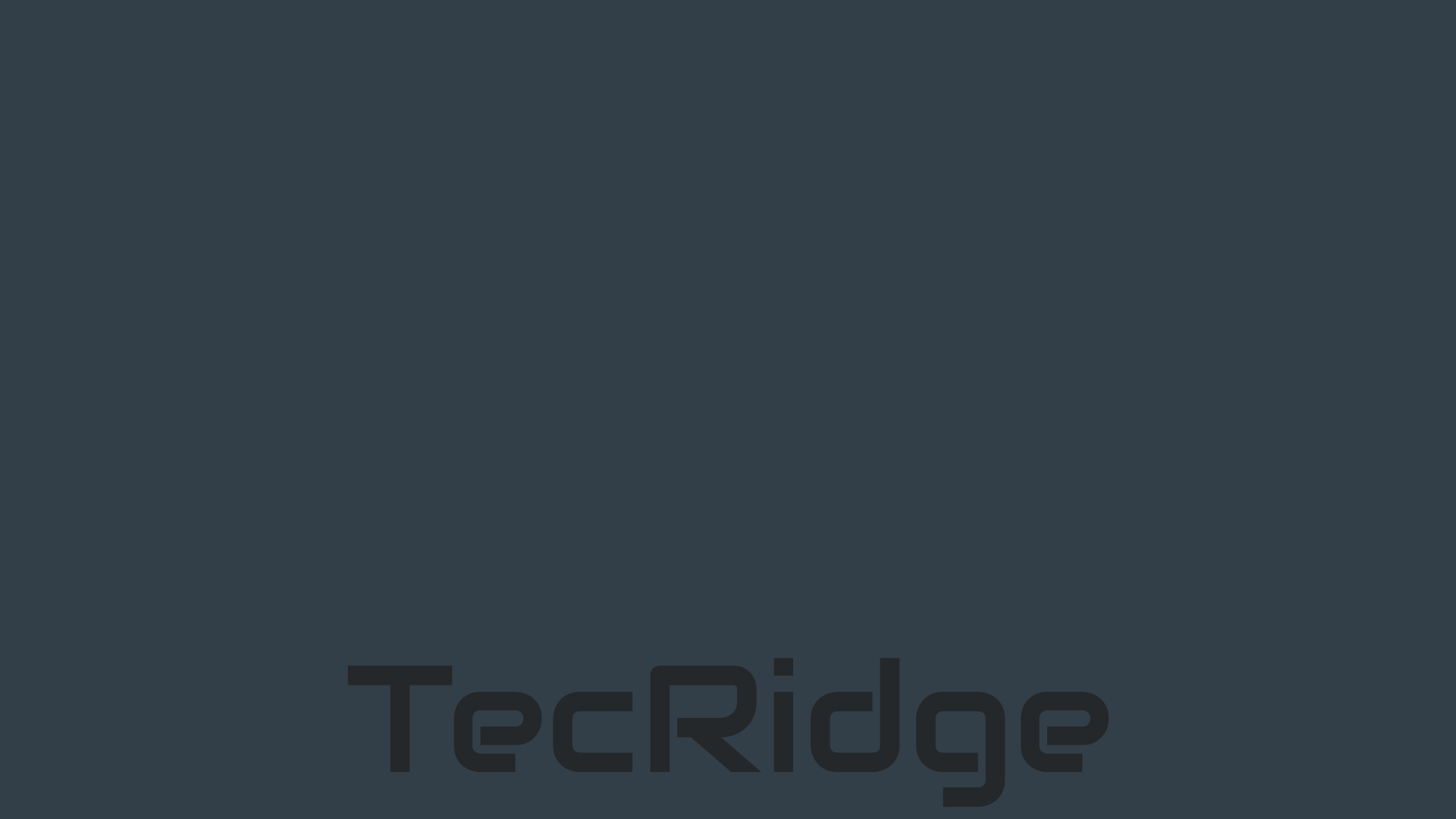
<style>
.page{position:relative;width:1456px;height:819px;background:#323e48}
.page>*{position:absolute;margin:0}
.t1{font:151.7px "Audiowide-Regular";color:#25282a}
</style>
<div class="page">
<p class="t1" style="left:347px;top:657px;width:762px;height:150px">TecRidge</p>
</div>
